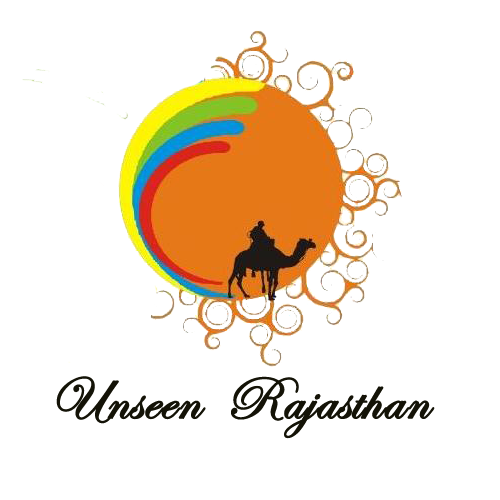
<style>
.page{position:relative;width:500px;height:500px;background:#ffffff}
.page>*{position:absolute;margin:0}
.t1{font:60px "EdwardianScriptITC";color:#141307;font-weight:bold}
.t2{font:60.3px "EdwardianScriptITC";color:#141307;font-weight:bold}
</style>
<div class="page">
<p class="t1" style="left:56px;top:376px;width:150px;height:48px">Unseen</p>
<p class="t2" style="left:231px;top:376px;width:204px;height:63px">Rajasthan</p>
</div>
